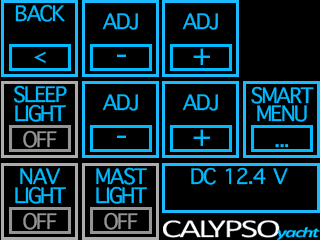
<style>
.page{position:relative;width:320px;height:240px;background:#000000}
.page>*{position:absolute;margin:0}
.t1{font:28.9px "AppleSymbols";letter-spacing:-0.05em;color:#00baff}
.t2{font:42.3px "AppleSymbols";letter-spacing:-0.05em;color:#00baff}
.t3{font:28.9px "AppleSymbols";letter-spacing:-0.05em;color:#949494}
</style>
<div class="page">
<p class="t1" style="left:15px;top:4px;width:50px;height:18px">BACK</p>
<p class="t1" style="left:102px;top:13px;width:36px;height:17px">ADJ</p>
<p class="t1" style="left:102px;top:13px;width:36px;height:17px">ADJ</p>
<p class="t1" style="left:182px;top:13px;width:36px;height:17px">ADJ</p>
<p class="t1" style="left:34px;top:51px;width:12px;height:12px">&lt;</p>
<p class="t2" style="left:117px;top:54px;width:9px;height:3px">-</p>
<p class="t2" style="left:117px;top:54px;width:9px;height:3px">-</p>
<p class="t2" style="left:193px;top:48px;width:17px;height:17px">+</p>
<p class="t1" style="left:14px;top:85px;width:53px;height:18px">SLEEP</p>
<p class="t1" style="left:251px;top:86px;width:63px;height:18px">SMART</p>
<p class="t1" style="left:102px;top:94px;width:36px;height:17px">ADJ</p>
<p class="t1" style="left:182px;top:94px;width:36px;height:17px">ADJ</p>
<p class="t1" style="left:15px;top:104px;width:51px;height:18px">LIGHT</p>
<p class="t1" style="left:257px;top:105px;width:50px;height:17px">MENU</p>
<p class="t3" style="left:23px;top:130px;width:34px;height:18px">OFF</p>
<p class="t2" style="left:117px;top:135px;width:9px;height:3px">-</p>
<p class="t2" style="left:193px;top:129px;width:17px;height:17px">+</p>
<p class="t1" style="left:275px;top:144px;width:14px;height:4px">...</p>
<p class="t1" style="left:20px;top:168px;width:40px;height:17px">NAV</p>
<p class="t1" style="left:96px;top:167px;width:51px;height:18px">MAST</p>
<p class="t1" style="left:191px;top:167px;width:97px;height:18px">DC 12.4 V</p>
<p class="t1" style="left:15px;top:186px;width:51px;height:18px">LIGHT</p>
<p class="t1" style="left:96px;top:186px;width:51px;height:18px">LIGHT</p>
<p class="t3" style="left:23px;top:212px;width:34px;height:18px">OFF</p>
<p class="t3" style="left:104px;top:212px;width:34px;height:18px">OFF</p>
</div>
